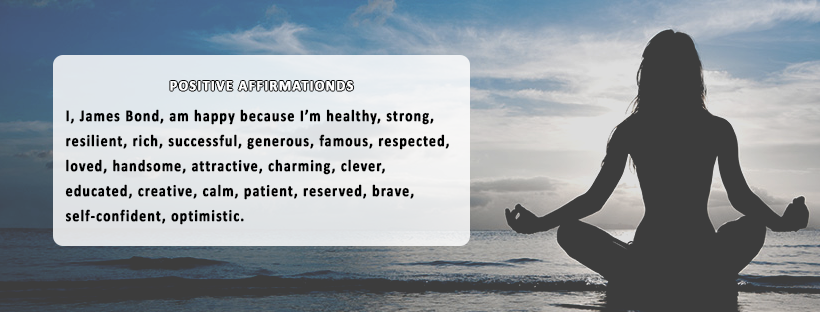
<style>
.page{position:relative;width:820px;height:312px}
.page>*{position:absolute;margin:0}
.t1{font:14px "Calibri-Bold";letter-spacing:0.075em;color:#ffffff;font-weight:bold}
.t2{font:16.6px/24.9px "Calibri-Bold";letter-spacing:0.075em;color:#000000;font-weight:bold;scale:0.81 1}
</style>
<div class="page">
<p class="t1" style="left:170px;top:81px;width:184px;height:10px">POSITIVE AFFIRMATIONDS</p>
<p class="t2" style="left:65px;top:109px;width:384px;height:116px">I, James Bond, am happy because I’m healthy, strong, resilient, rich, successful, generous, famous, respected, loved, handsome, attractive, charming, clever, educated, creative, calm, patient, reserved, brave, self-confident, optimistic.</p>
</div>
